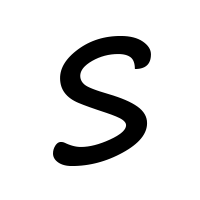
<style>
.page{position:relative;width:200px;height:200px;background:#ffffff}
.page>*{position:absolute;margin:0}
.t1{font:170px "SegoePrint-Bold";color:#000000}
</style>
<div class="page">
<p class="t1" style="left:53px;top:36px;width:98px;height:130px">S</p>
</div>
